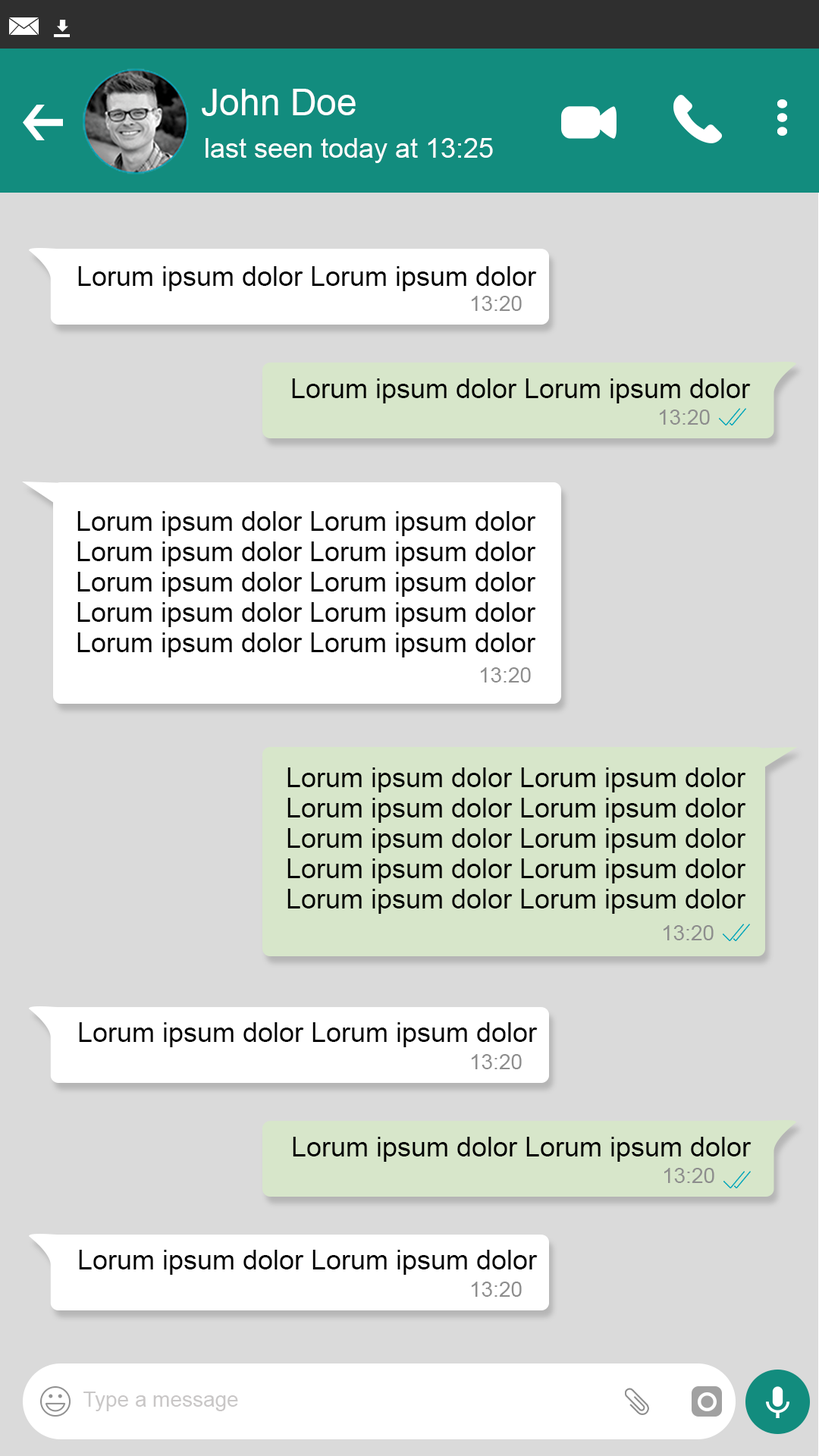
<style>
.page{position:relative;width:819px;height:1456px;background:#dadada}
.page>*{position:absolute;margin:0}
.t1{font:36.4px "ArialMT";color:#ffffff}
.t2{font:27.3px "ArialMT";color:#ffffff}
.t3{font:27.3px "ArialMT";color:#000000}
.t4{font:21.2px "ArialMT";color:#8d8d8d}
.t5{font:21.2px "ArialMT";color:#c9c7c7}
</style>
<div class="page">
<p class="t1" style="left:202px;top:89px;width:154px;height:27px">John Doe</p>
<p class="t2" style="left:206px;top:138px;width:287px;height:25px">last seen today at 13:25</p>
<p class="t3" style="left:78px;top:266px;width:459px;height:25px">Lorum ipsum dolor Lorum ipsum dolor</p>
<p class="t4" style="left:472px;top:296px;width:50px;height:15px">13:20</p>
<p class="t3" style="left:292px;top:378px;width:459px;height:25px">Lorum ipsum dolor Lorum ipsum dolor</p>
<p class="t4" style="left:660px;top:409px;width:50px;height:16px">13:20</p>
<p class="t3" style="left:77px;top:511px;width:459px;height:25px">Lorum ipsum dolor Lorum ipsum dolor</p>
<p class="t3" style="left:77px;top:541px;width:459px;height:25px">Lorum ipsum dolor Lorum ipsum dolor</p>
<p class="t3" style="left:77px;top:572px;width:459px;height:25px">Lorum ipsum dolor Lorum ipsum dolor</p>
<p class="t3" style="left:77px;top:602px;width:459px;height:25px">Lorum ipsum dolor Lorum ipsum dolor</p>
<p class="t3" style="left:77px;top:632px;width:459px;height:25px">Lorum ipsum dolor Lorum ipsum dolor</p>
<p class="t4" style="left:481px;top:667px;width:50px;height:15px">13:20</p>
<p class="t3" style="left:287px;top:767px;width:459px;height:25px">Lorum ipsum dolor Lorum ipsum dolor</p>
<p class="t3" style="left:287px;top:798px;width:459px;height:25px">Lorum ipsum dolor Lorum ipsum dolor</p>
<p class="t3" style="left:287px;top:828px;width:459px;height:25px">Lorum ipsum dolor Lorum ipsum dolor</p>
<p class="t3" style="left:287px;top:858px;width:459px;height:25px">Lorum ipsum dolor Lorum ipsum dolor</p>
<p class="t3" style="left:287px;top:889px;width:459px;height:25px">Lorum ipsum dolor Lorum ipsum dolor</p>
<p class="t4" style="left:664px;top:925px;width:50px;height:15px">13:20</p>
<p class="t3" style="left:79px;top:1022px;width:459px;height:25px">Lorum ipsum dolor Lorum ipsum dolor</p>
<p class="t4" style="left:472px;top:1054px;width:50px;height:15px">13:20</p>
<p class="t3" style="left:293px;top:1137px;width:458px;height:25px">Lorum ipsum dolor Lorum ipsum dolor</p>
<p class="t4" style="left:664px;top:1168px;width:50px;height:15px">13:20</p>
<p class="t3" style="left:79px;top:1250px;width:459px;height:25px">Lorum ipsum dolor Lorum ipsum dolor</p>
<p class="t4" style="left:472px;top:1282px;width:50px;height:15px">13:20</p>
<p class="t5" style="left:83px;top:1392px;width:155px;height:19px">Type a message</p>
</div>
